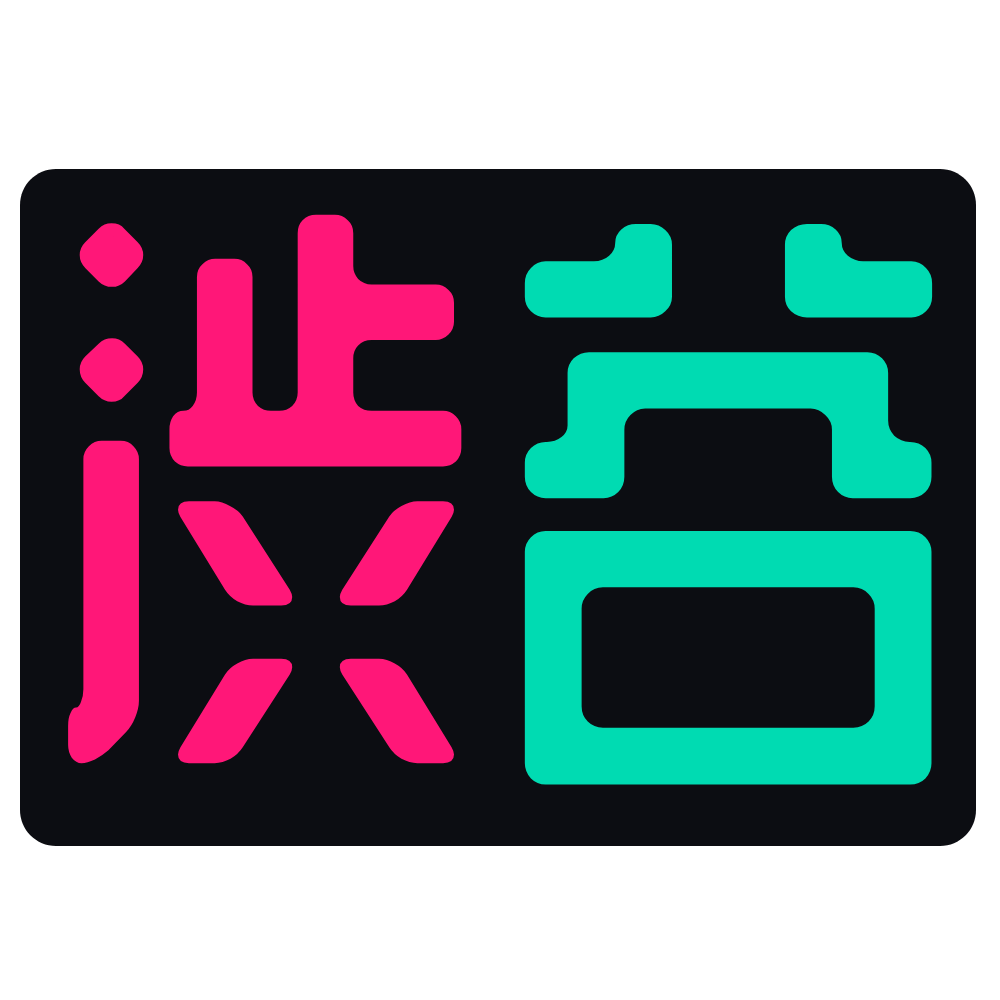
<style>
.page{position:relative;width:1000px;height:1000px;background:#0c0d12}
.page>*{position:absolute;margin:0}
.t1{font:610.6px "ZCOOLQingKeHuangYou-Regular";color:#ff1778}
.t2{font:610.6px "ZCOOLQingKeHuangYou-Regular";color:#00dbb2}
</style>
<div class="page">
<p class="t1" style="left:68px;top:214px;width:865px;height:571px">渋<span class="t2">谷</span></p>
</div>
